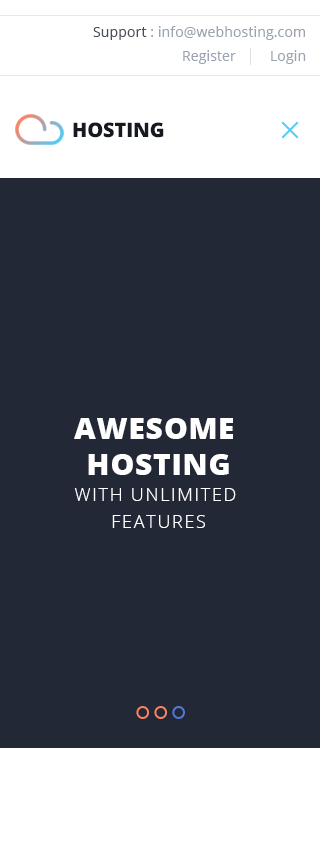
<style>
.page{position:relative;width:320px;height:841px;background:#222836}
.page>*{position:absolute;margin:0}
.t1{font:14px/24px "OpenSans";letter-spacing:0.01em;color:#9ba4b0}
.t2{font:14px/24px "OpenSans";letter-spacing:0.01em;color:#484e57}
.t3{font:20px "OpenSans-Extrabold";letter-spacing:-0.005em;color:#161920;text-transform:uppercase}
.t4{font:18px "OpenSans-Light";letter-spacing:0.095em;color:#ffffff;text-transform:uppercase}
.t5{font:30px "OpenSans-Extrabold";letter-spacing:0.025em;color:#ffffff;text-transform:uppercase}
</style>
<div class="page">
<p class="t1" style="left:93px;top:26px;width:213px;height:38px;text-align:right"><span class="t2">Support </span>: info@webhosting.com<br>Register         Login</p>
<p class="t3" style="left:73px;top:122px;width:91px;height:16px">Hosting</p>
<p class="t4" style="left:74px;top:418px;width:162px;height:110px;text-align:center"><span class="t5">Awesome <br>hosting<br></span>with unlimited <br>features</p>
</div>
